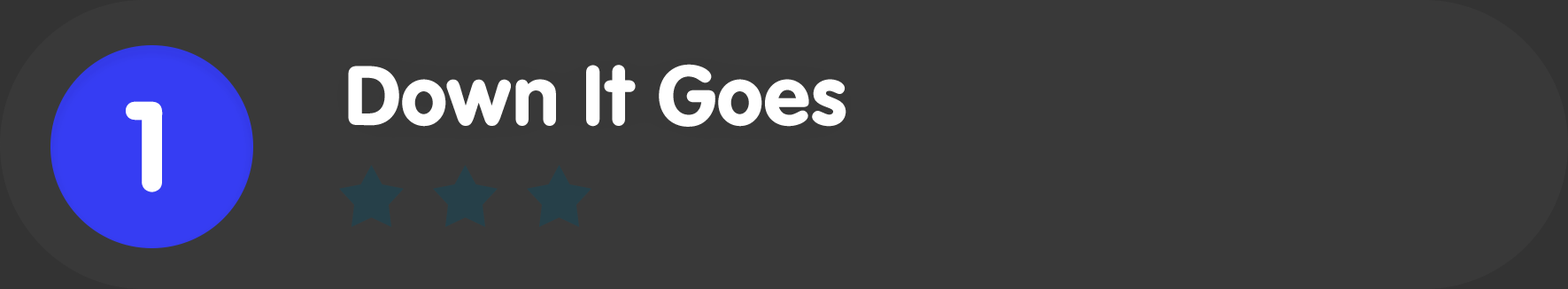
<style>
.page{position:relative;width:1568px;height:289px;background:#393939}
.page>*{position:absolute;margin:0}
.t1{font:88.5px "VAGRundschriftD";color:#ffffff}
.t2{font:132.8px "VAGRundschriftD";color:#ffffff}
</style>
<div class="page">
<p class="t1" style="left:348px;top:64px;width:498px;height:63px">Down It Goes</p>
<p class="t2" style="left:126px;top:101px;width:37px;height:91px">1</p>
</div>
